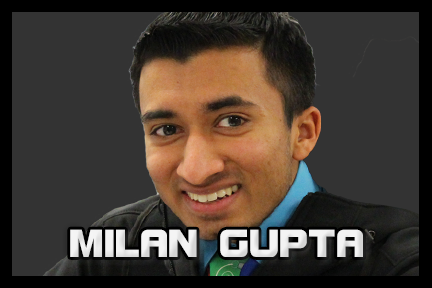
<style>
.page{position:relative;width:432px;height:288px;background:#333333}
.page>*{position:absolute;margin:0}
.t1{font:41.7px "BolsterBold";color:#f3f3f3}
</style>
<div class="page">
<p class="t1" style="left:70px;top:229px;width:293px;height:28px">MILAN GUPTA</p>
</div>
